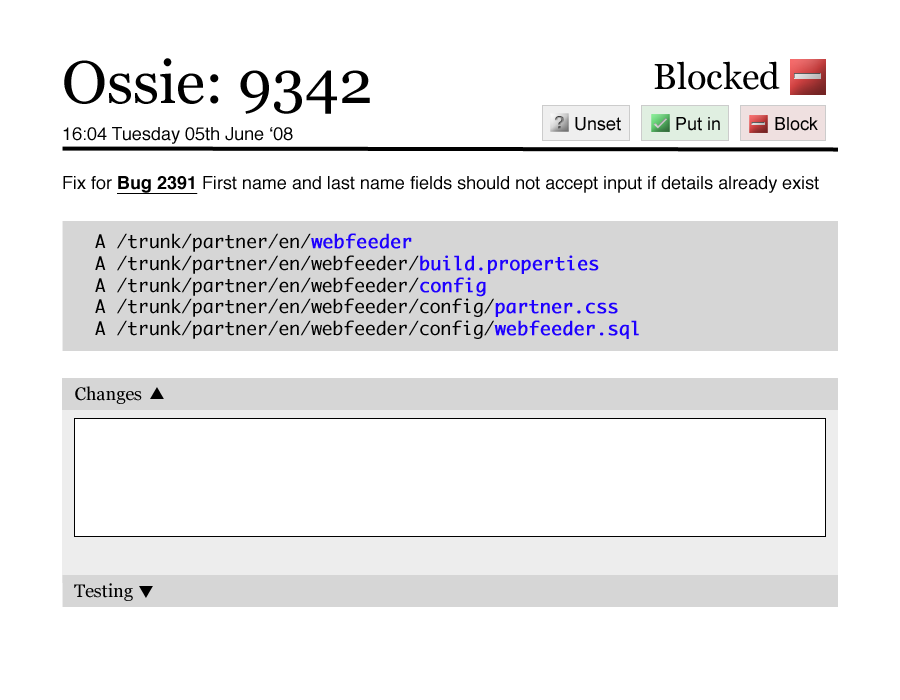
<style>
.page{position:relative;width:900px;height:700px;background:#ffffff}
.page>*{position:absolute;margin:0}
.t1{font:60px "Georgia";color:#000000}
.t2{font:36px "Georgia";color:#000000}
.t3{font:18px "ArialMT";color:#000000}
.t4{font:18px "Helvetica";color:#000000}
.t5{font:18px "Helvetica-Bold";color:#000000;text-decoration:underline}
.t6{font:18px "Monaco";color:#000000}
.t7{font:18px "Monaco";color:#1e00ff;font-weight:bold}
.t8{font:18px "Georgia";color:#000000}
</style>
<div class="page">
<p class="t1" style="left:64px;top:58px;width:306px;height:56px">Ossie: 9342</p>
<p class="t2" style="left:654px;top:61px;width:126px;height:29px">Blocked</p>
<p class="t3" style="left:575px;top:117px;width:46px;height:14px">Unset</p>
<p class="t3" style="left:676px;top:117px;width:44px;height:14px">Put in</p>
<p class="t3" style="left:775px;top:117px;width:43px;height:14px">Block</p>
<p class="t4" style="left:63px;top:127px;width:230px;height:17px">16:04 Tuesday 05th June ‘08</p>
<p class="t4" style="left:63px;top:176px;width:756px;height:18px">Fix for <span class="t5">Bug 2391</span> First name and last name fields should not accept input if details already exist</p>
<p class="t6" style="left:95px;top:233px;width:544px;height:106px">A /trunk/partner/en/<span class="t7">webfeeder<br></span>   A /trunk/partner/en/webfeeder/<span class="t7">build.properties<br></span>   A /trunk/partner/en/webfeeder/<span class="t7">config<br></span>   A /trunk/partner/en/webfeeder/config/<span class="t7">partner.css<br></span>   A /trunk/partner/en/webfeeder/config/<span class="t7">webfeeder.sql</span></p>
<p class="t8" style="left:75px;top:386px;width:67px;height:18px">Changes</p>
<p class="t8" style="left:74px;top:583px;width:59px;height:18px">Testing</p>
</div>
